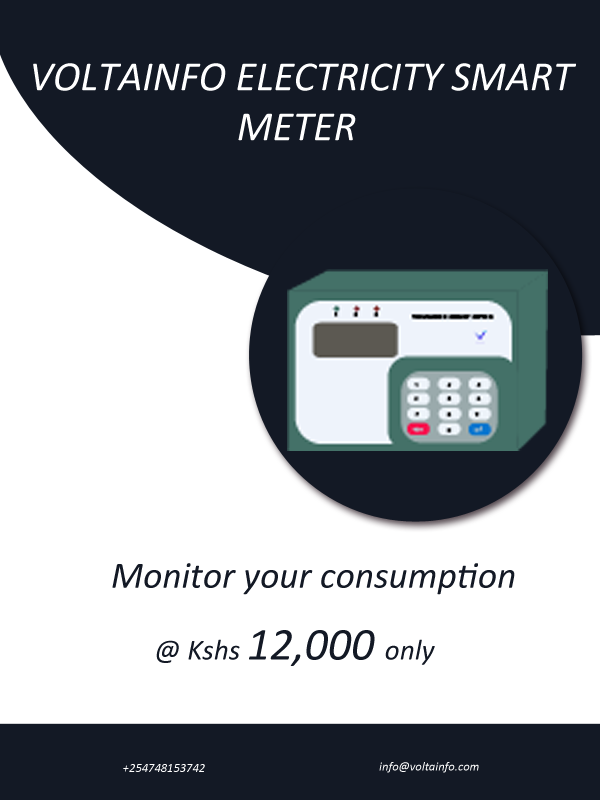
<style>
.page{position:relative;width:600px;height:800px;background:#ffffff}
.page>*{position:absolute;margin:0}
.t1{font:41.7px "Calibri-Italic";color:#ffffff}
.t2{font:37.5px "Calibri-Italic";color:#131925}
.t3{font:29.2px "Calibri-Italic";color:#131925}
.t4{font:45.9px "Calibri-Italic";color:#131925}
.t5{font:12.5px "Calibri-Italic";color:#ffffff}
</style>
<div class="page">
<p class="t1" style="left:33px;top:63px;width:543px;height:78px">VOLTAINFO ELECTRICITY SMART<br>                      METER</p>
<p class="t2" style="left:112px;top:563px;width:403px;height:32px">Monitor your consumption</p>
<p class="t3" style="left:156px;top:630px;width:279px;height:36px">@ Kshs <span class="t4">12,000 </span>only</p>
<p class="t5" style="left:123px;top:764px;width:82px;height:8px">+254748153742</p>
<p class="t5" style="left:379px;top:762px;width:100px;height:11px">info@voltainfo.com</p>
</div>
